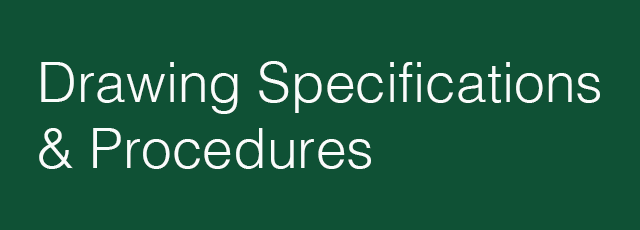
<style>
.page{position:relative;width:640px;height:230px;background:#0f5135}
.page>*{position:absolute;margin:0}
.t1{font:55px "Helvetica-Light";color:#f9fcfb}
</style>
<div class="page">
<p class="t1" style="left:39px;top:61px;width:561px;height:108px">Drawing Specifications<br>&amp; Procedures</p>
</div>
